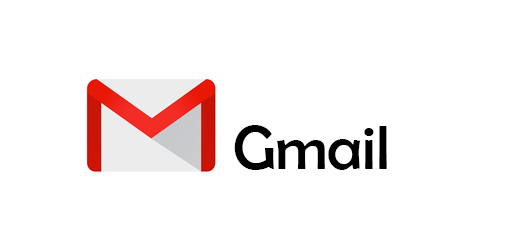
<style>
.page{position:relative;width:512px;height:250px;background:#ffffff}
.page>*{position:absolute;margin:0}
.t1{font:62.5px "BerlinSansFB-Reg";color:#010000}
</style>
<div class="page">
<p class="t1" style="left:234px;top:125px;width:153px;height:45px">Gmail</p>
</div>
